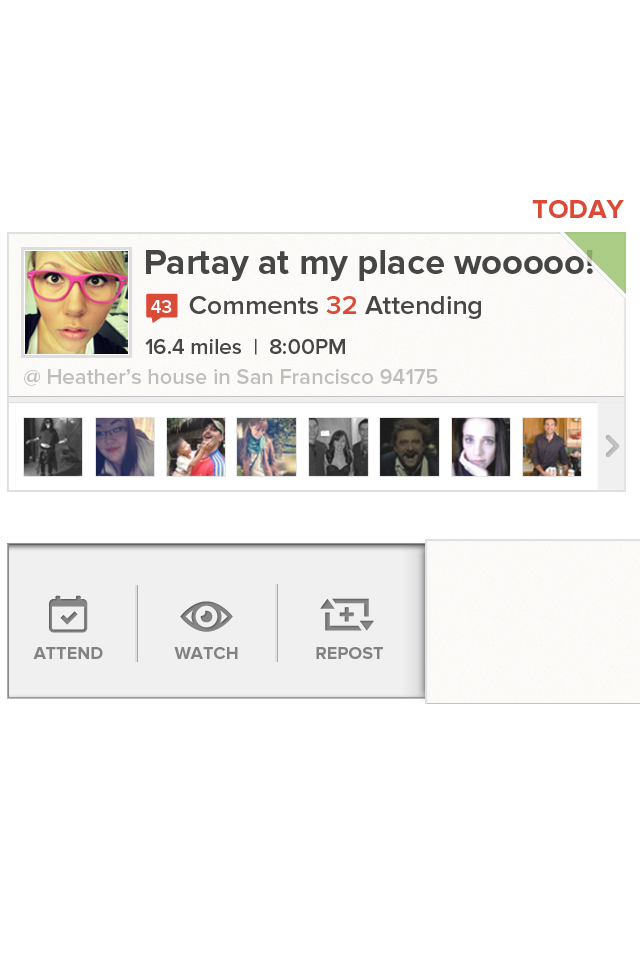
<style>
.page{position:relative;width:640px;height:960px;background:#ffffff}
.page>*{position:absolute;margin:0}
.t1{font:27px "ProximaNova-Bold";color:#db4937}
.t2{font:36px "ProximaNova-Bold";color:#464646}
.t3{font:18.5px "ProximaNova-Semibold";color:#ffffff}
.t4{font:27px "ProximaNova-Semibold";color:#464646}
.t5{font:27px "ProximaNova-Semibold";color:#db4937}
.t6{font:22px "ProximaNova-Semibold";color:#464646}
.t7{font:22px "ProximaNova-Semibold";color:#bebebd}
.t8{font:18px "ProximaNova-Bold";color:#828282;text-transform:uppercase}
</style>
<div class="page">
<p class="t1" style="left:532px;top:200px;width:92px;height:18px">TODAY</p>
<p class="t2" style="left:146px;top:250px;width:447px;height:31px">Partay at my place wooooo!</p>
<p class="t3" style="left:151px;top:300px;width:21px;height:13px">43</p>
<p class="t4" style="left:189px;top:296px;width:292px;height:23px">Comments <span class="t5">32 </span>Attending</p>
<p class="t6" style="left:145px;top:339px;width:200px;height:16px">16.4 miles  |  8:00PM</p>
<p class="t7" style="left:24px;top:369px;width:414px;height:17px">@ Heather’s house in San Francisco 94175</p>
<p class="t8" style="left:33px;top:647px;width:70px;height:12px">ATTEND</p>
<p class="t8" style="left:174px;top:647px;width:64px;height:12px">watch</p>
<p class="t8" style="left:316px;top:647px;width:67px;height:12px">repost</p>
</div>
